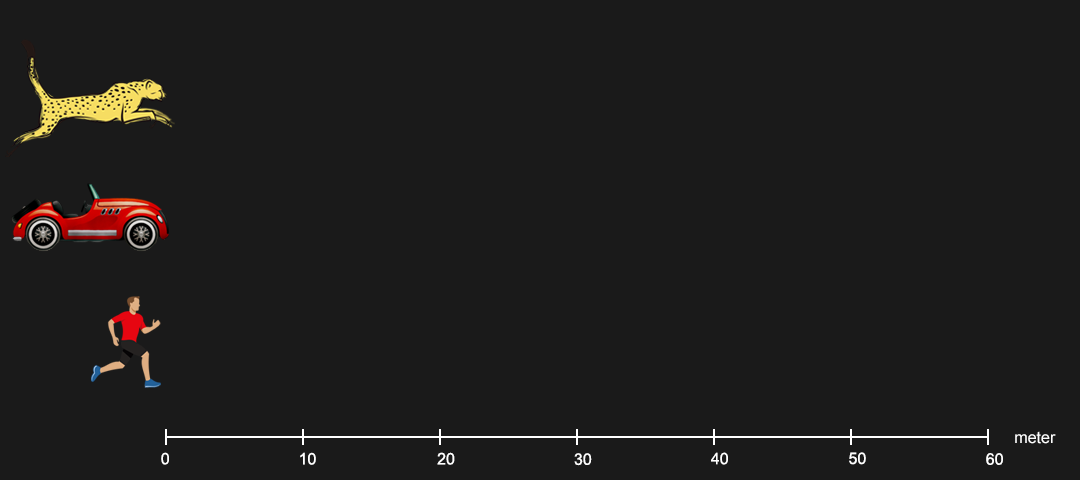
<style>
.page{position:relative;width:1080px;height:480px;background:#1a1a1a}
.page>*{position:absolute;margin:0}
.t1{font:16px "ArialMT";color:#ffffff}
</style>
<div class="page">
<p class="t1" style="left:1015px;top:431px;width:41px;height:13px">meter</p>
<p class="t1" style="left:161px;top:452px;width:8px;height:13px">0</p>
<p class="t1" style="left:300px;top:452px;width:16px;height:13px">10</p>
<p class="t1" style="left:437px;top:452px;width:18px;height:13px">20</p>
<p class="t1" style="left:574px;top:453px;width:18px;height:13px">30</p>
<p class="t1" style="left:711px;top:452px;width:17px;height:13px">40</p>
<p class="t1" style="left:849px;top:452px;width:17px;height:13px">50</p>
<p class="t1" style="left:986px;top:453px;width:17px;height:12px">60</p>
</div>
